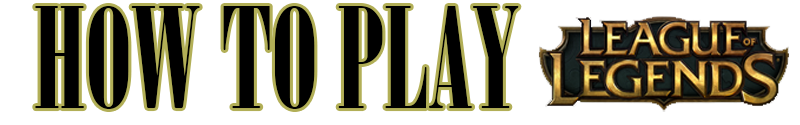
<style>
.page{position:relative;width:800px;height:125px;background:#ffffff}
.page>*{position:absolute;margin:0}
.t1{font:139.4px "Onyx";color:#000000;scale:1.04 1}
</style>
<div class="page">
<p class="t1" style="left:35px;top:6px;width:484px;height:103px">HOW TO PLAY</p>
</div>
